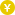
<style>
.page{position:relative;width:15px;height:15px;background:#e8ca00}
.page>*{position:absolute;margin:0}
.t1{font:10px "AdobeHeitiStd-Regular";color:#ffffff}
</style>
<div class="page">
<p class="t1" style="left:4px;top:4px;width:7px;height:8px">￥</p>
</div>
